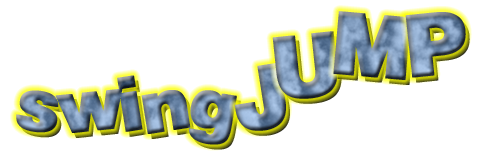
<style>
.page{position:relative;width:480px;height:158px;background:#ffffff}
.page>*{position:absolute;margin:0}
.t1{font:85px "Soopafresh";font-weight:bold}
.t2{font:72px "Soopafresh";font-weight:bold}
</style>
<div class="page">
<p class="t1" style="left:333px;top:11px;width:78px;height:69px">M</p>
<p class="t1" style="left:405px;top:12px;width:61px;height:66px">P</p>
<p class="t1" style="left:272px;top:31px;width:66px;height:68px">U</p>
<p class="t1" style="left:235px;top:62px;width:51px;height:69px">J</p>
<p class="t2" style="left:16px;top:75px;width:221px;height:70px">swing</p>
</div>
